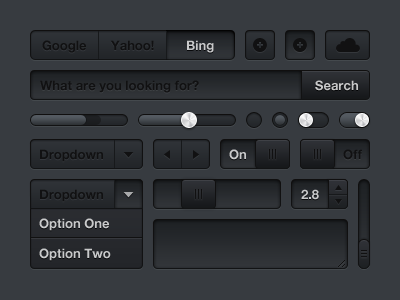
<style>
.page{position:relative;width:400px;height:300px;background:#373b40}
.page>*{position:absolute;margin:0}
.t1{font:13px "HelveticaNeue-Bold";color:#111112}
.t2{font:13px "HelveticaNeue-Bold";color:#cacacb}
.t3{font:13px "HelveticaNeue-Bold";color:#c7c8c9}
.t4{font:13px "HelveticaNeue-Bold";color:#c9cacb}
.t5{font:13px "HelveticaNeue-Bold";color:#c8c9ca}
</style>
<div class="page">
<p class="t1" style="left:42px;top:40px;width:44px;height:13px">Google</p>
<p class="t1" style="left:110px;top:40px;width:44px;height:11px">Yahoo!</p>
<p class="t2" style="left:187px;top:40px;width:27px;height:13px">Bing</p>
<p class="t1" style="left:40px;top:80px;width:159px;height:13px">What are you looking for?</p>
<p class="t3" style="left:315px;top:80px;width:43px;height:11px">Search</p>
<p class="t1" style="left:40px;top:149px;width:63px;height:13px">Dropdown</p>
<p class="t4" style="left:229px;top:149px;width:17px;height:11px">On</p>
<p class="t1" style="left:343px;top:149px;width:19px;height:11px">Off</p>
<p class="t1" style="left:40px;top:189px;width:63px;height:13px">Dropdown</p>
<p class="t2" style="left:301px;top:189px;width:18px;height:11px">2.8</p>
<p class="t4" style="left:39px;top:218px;width:70px;height:13px">Option One</p>
<p class="t5" style="left:39px;top:248px;width:72px;height:13px">Option Two</p>
</div>
